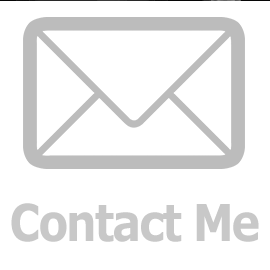
<style>
.page{position:relative;width:270px;height:270px;background:#ffffff}
.page>*{position:absolute;margin:0}
.t1{font:51.1px "Verdana-Bold";letter-spacing:-0.05em;color:#c8c8c8;scale:0.85 1}
</style>
<div class="page">
<p class="t1" style="left:11px;top:202px;width:248px;height:39px">Contact Me</p>
</div>
